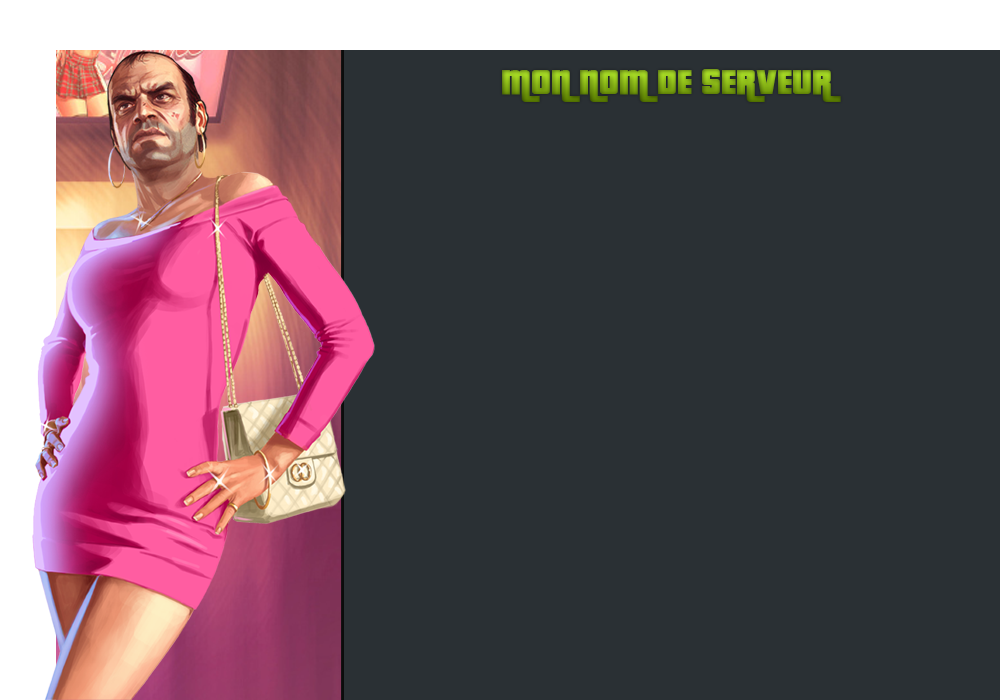
<style>
.page{position:relative;width:1000px;height:700px;background:#2a3034}
.page>*{position:absolute;margin:0}
.t1{font:48px "Pricedown"}
</style>
<div class="page">
<p class="t1" style="left:502px;top:69px;width:339px;height:33px">MON NOM DE SERVEUR</p>
</div>
